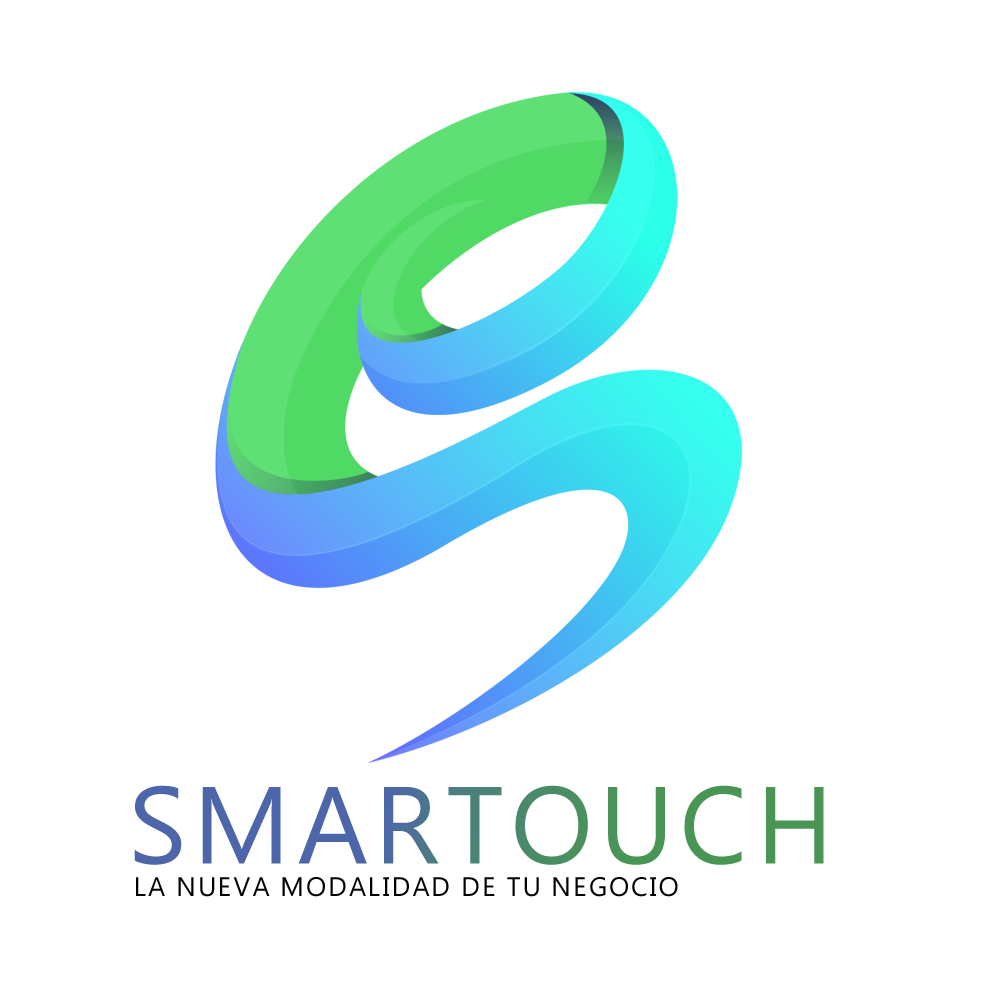
<style>
.page{position:relative;width:1000px;height:1000px;background:#ffffff}
.page>*{position:absolute;margin:0}
.t1{font:108.7px "Ebrima";letter-spacing:0.07em}
.t2{font:26.9px "Ebrima";letter-spacing:0.07em;color:#000000}
</style>
<div class="page">
<p class="t1" style="left:134px;top:785px;width:690px;height:80px">SMARTOUCH</p>
<p class="t2" style="left:136px;top:877px;width:542px;height:20px">LA NUEVA MODALIDAD DE TU NEGOCIO</p>
</div>
